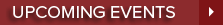
<style>
.page{position:relative;width:223px;height:25px;background:#8c2b2d}
.page>*{position:absolute;margin:0}
.t1{font:18px "ProximaNova-Regular";color:#fefefe}
</style>
<div class="page">
<p class="t1" style="left:13px;top:6px;width:162px;height:12px">UPCOMING EVENTS</p>
</div>
